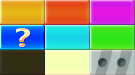
<style>
.page{position:relative;width:135px;height:75px}
.page>*{position:absolute;margin:0}
.t1{font:26.7px "LeelawadeeUI-Bold";scale:1.35 1}
</style>
<div class="page">
<p class="t1" style="left:16px;top:28px;width:14px;height:19px">?</p>
</div>
